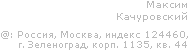
<style>
.page{position:relative;width:189px;height:50px;background:#ffffff}
.page>*{position:absolute;margin:0}
.t1{font:10px "Verdana";color:#bababa}
.t2{font:9px "Verdana";color:#bbbbbb}
</style>
<div class="page">
<p class="t1" style="left:117px;top:1px;width:70px;height:21px;text-align:right">Максим<br> Качуровский</p>
<p class="t2" style="left:1px;top:31px;width:187px;height:19px">@: Россия, Москва, индекс 124460,<br>      г. Зеленоград, корп. 1135, кв. 44</p>
</div>
